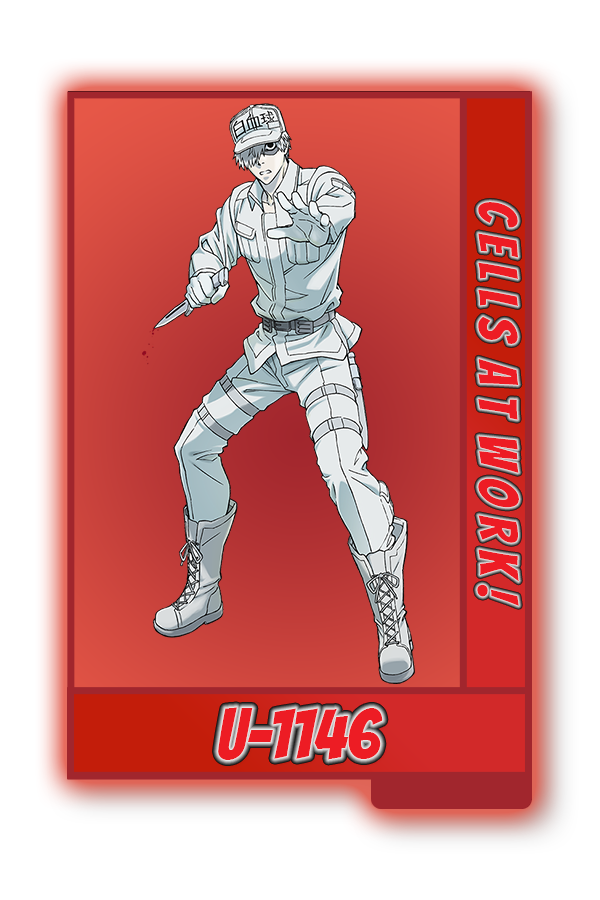
<style>
.page{position:relative;width:600px;height:900px;background:#ffffff}
.page>*{position:absolute;margin:0}
.t1{font:54px "Bangers-Regular";color:#ed1c24}
.t2{font:70px "Bangers-Regular";color:#ed1c24}
</style>
<div class="page">
<p class="t1" style="left:477px;top:202px;width:42px;height:404px;rotate:90deg">C e l l S  A t  W o r k !</p>
<p class="t2" style="left:218px;top:707px;width:165px;height:53px">U-1146</p>
</div>
